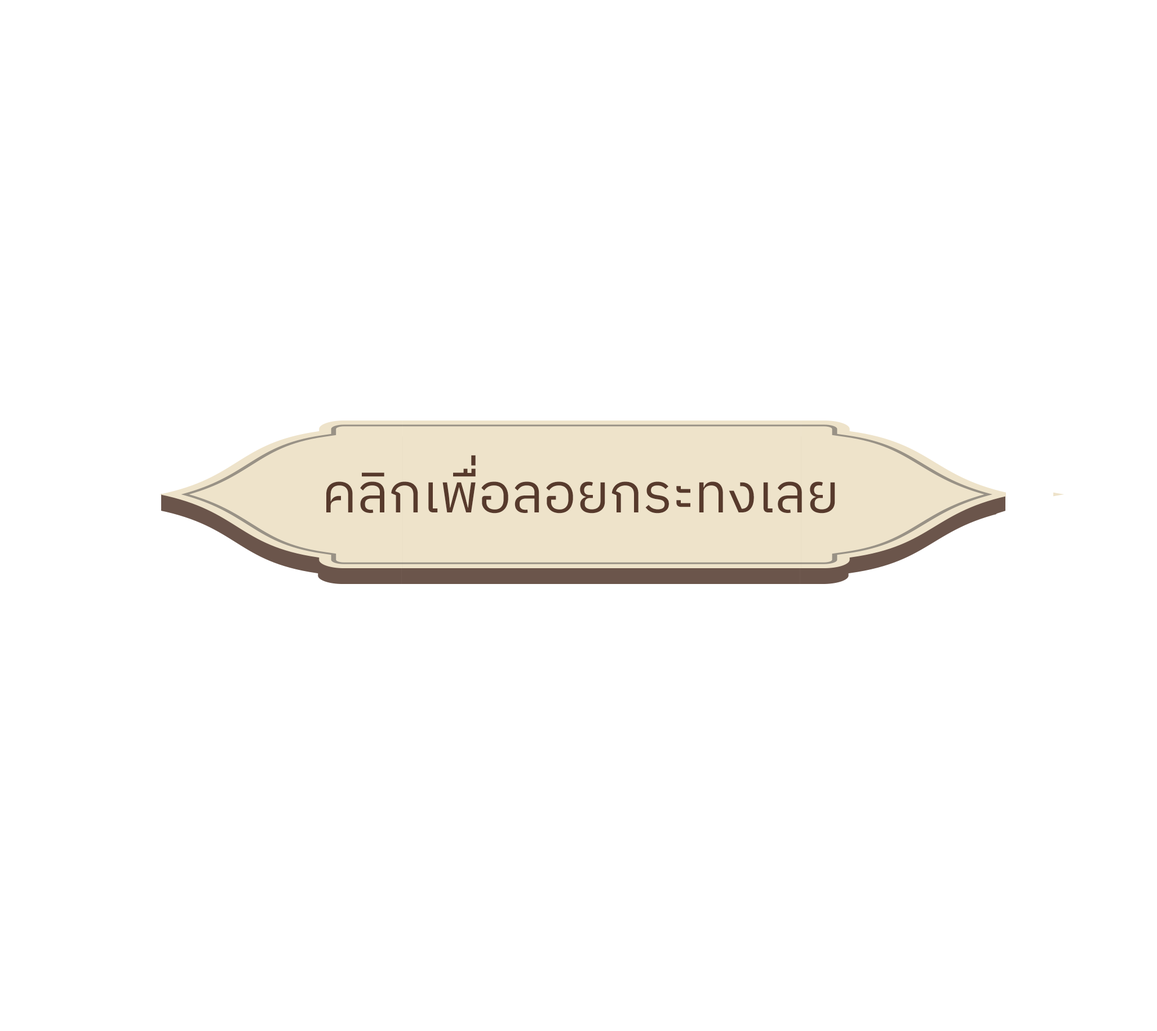
<style>
.page{position:relative;width:1157px;height:1031px;background:#ffffff}
.page>*{position:absolute;margin:0}
.t1{font:54.9px "IBMPlexSansThai-Regular";color:#573a2c}
</style>
<div class="page">
<p class="t1" style="left:326px;top:455px;width:509px;height:58px">คลิกเพื่อลอยกระทงเลย</p>
</div>
